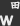
<style>
.page{position:relative;width:20px;height:26px;background:#333333}
.page>*{position:absolute;margin:0}
.t1{font:12px "DFKaiShu-SB-Estd-BF";color:#ececec;font-weight:bold}
.t2{font:18px "ArialMT";color:#ececec;font-weight:bold}
</style>
<div class="page">
<p class="t1" style="left:10px;top:1px;width:10px;height:8px">田</p>
<p class="t2" style="left:0px;top:15px;width:14px;height:11px">w</p>
</div>
